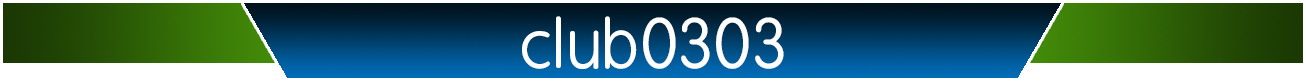
<style>
.page{position:relative;width:1306px;height:81px}
.page>*{position:absolute;margin:0}
.t1{font:66px "BPreplay";color:#ffffff}
</style>
<div class="page">
<p class="t1" style="left:522px;top:16px;width:262px;height:53px">club0303</p>
</div>
